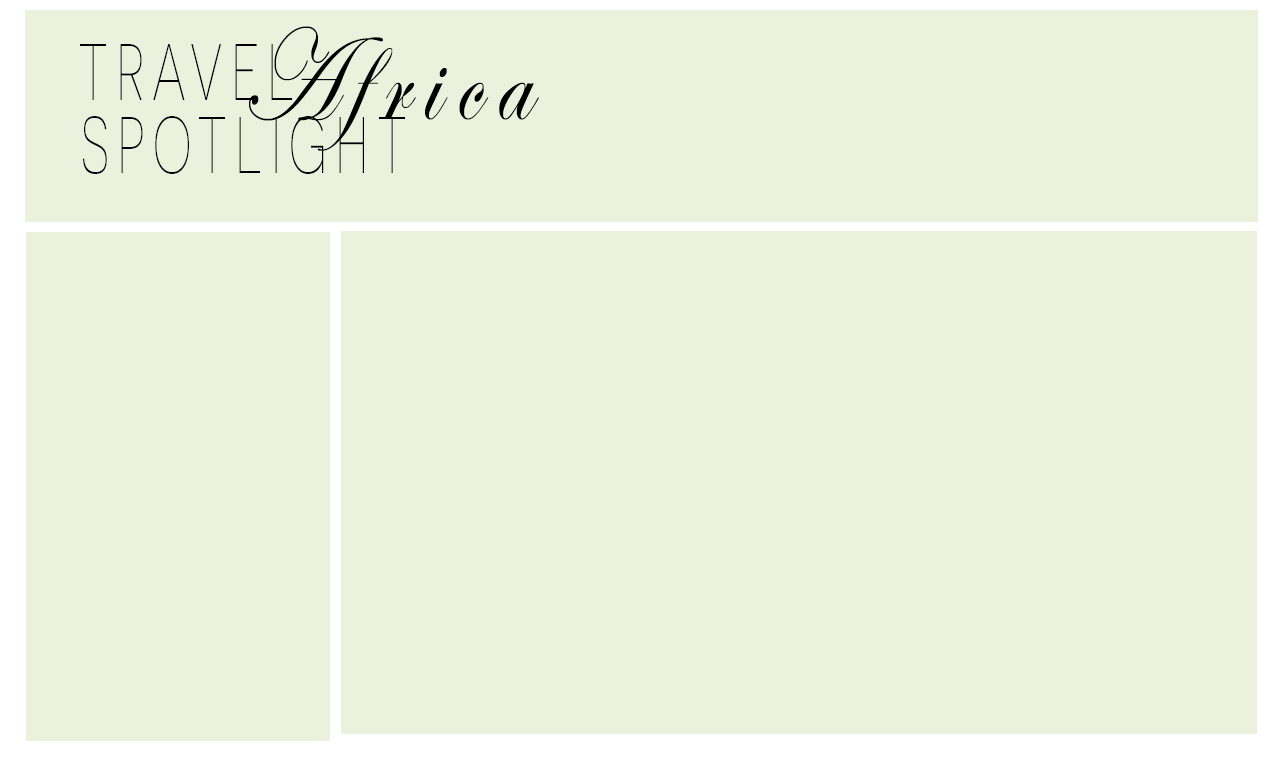
<style>
.page{position:relative;width:1280px;height:768px;background:#ecf1dd}
.page>*{position:absolute;margin:0}
.t1{font:133.3px "EdwardianScriptITC";letter-spacing:0.15em;color:#000000;scale:0.77 1}
.t2{font:79.9px "iCielNovecentosans-ExtraLight";letter-spacing:0.15em;color:#000000;scale:0.68 1}
</style>
<div class="page">
<p class="t1" style="left:249px;top:26px;width:290px;height:125px">Africa</p>
<p class="t2" style="left:80px;top:44px;width:212px;height:56px">TRAVEL</p>
<p class="t2" style="left:83px;top:116px;width:322px;height:58px">SPOTLIGHT</p>
</div>
